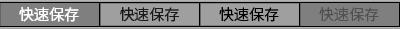
<style>
.page{position:relative;width:400px;height:29px;background:#7f7f7f}
.page>*{position:absolute;margin:0}
.t1{font:15px "SourceHanSansSC-Normal";color:#ffffff}
.t2{font:15px "SourceHanSansSC-Normal";color:#191919}
.t3{font:15px "SourceHanSansSC-Normal";color:#000000}
.t4{font:15px "SourceHanSansSC-Normal";color:#505050}
</style>
<div class="page">
<p class="t1" style="left:19px;top:7px;width:60px;height:15px">快速保存</p>
<p class="t2" style="left:120px;top:7px;width:59px;height:15px">快速保存</p>
<p class="t3" style="left:219px;top:7px;width:60px;height:15px">快速保存</p>
<p class="t4" style="left:319px;top:7px;width:60px;height:15px">快速保存</p>
</div>
